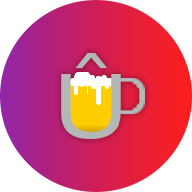
<style>
.page{position:relative;width:192px;height:192px;background:#ffffff}
.page>*{position:absolute;margin:0}
.t1{font:91.2px "SegoeUI";letter-spacing:0.2em;color:#b3b8b7;scale:1.25 1}
</style>
<div class="page">
<p class="t1" style="left:61px;top:53px;width:60px;height:86px">Û</p>
</div>
